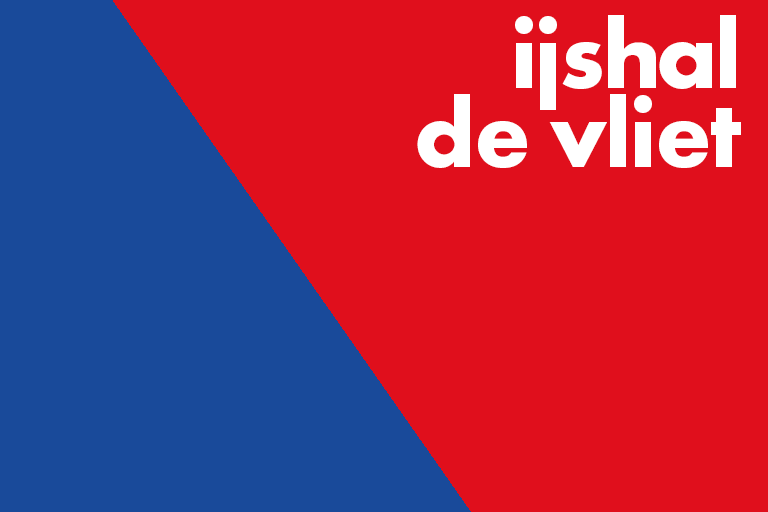
<style>
.page{position:relative;width:768px;height:512px;background:#e00f1c}
.page>*{position:absolute;margin:0}
.t1{font:100px/79.2px "FuturaPT-Bold";letter-spacing:-0.02em;color:#ffffff}
</style>
<div class="page">
<p class="t1" style="left:417px;top:15px;width:324px;height:153px;text-align:right">ijshal<br>de vliet</p>
</div>
